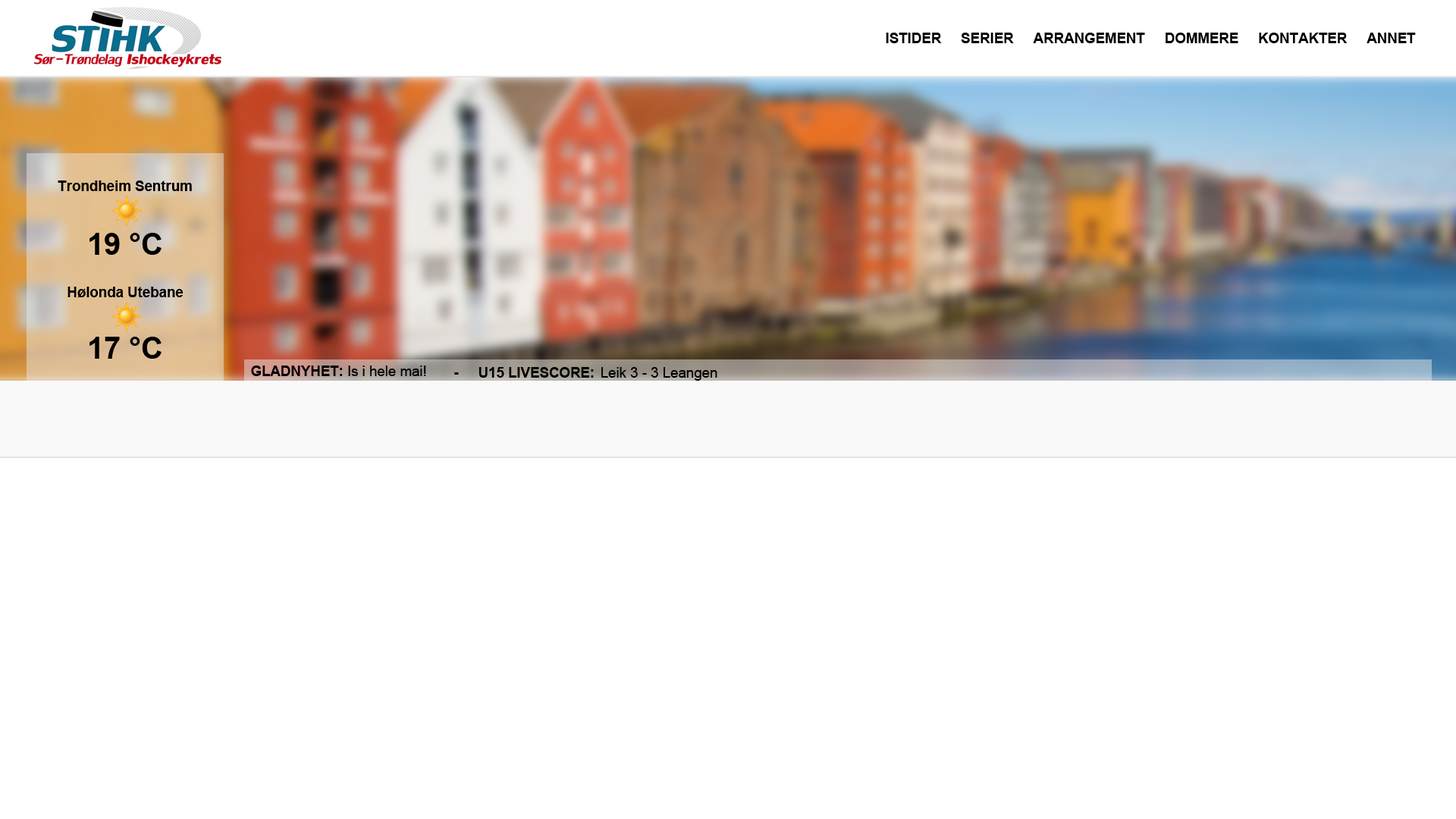
<style>
.page{position:relative;width:1456px;height:819px;background:#ffffff}
.page>*{position:absolute;margin:0}
.t1{font:14.2px "Arial-BoldMT";color:#000000}
.t2{font:30.3px "Arial-BoldMT";color:#000000}
.t3{font:14.2px "ArialMT";color:#000000}
</style>
<div class="page">
<p class="t1" style="left:886px;top:33px;width:530px;height:10px">ISTIDER     SERIER     ARRANGEMENT     DOMMERE     KONTAKTER     ANNET</p>
<p class="t1" style="left:58px;top:180px;width:134px;height:11px">Trondheim Sentrum</p>
<p class="t2" style="left:89px;top:233px;width:73px;height:22px">19 °C</p>
<p class="t1" style="left:67px;top:287px;width:117px;height:11px">Hølonda Utebane</p>
<p class="t2" style="left:89px;top:337px;width:73px;height:22px">17 °C</p>
<p class="t1" style="left:251px;top:366px;width:91px;height:10px">GLADNYHET:</p>
<p class="t3" style="left:348px;top:366px;width:78px;height:10px">Is i hele mai!</p>
<p class="t1" style="left:454px;top:367px;width:140px;height:11px">-     U15 LIVESCORE:</p>
<p class="t3" style="left:601px;top:367px;width:116px;height:14px">Leik 3 - 3 Leangen</p>
</div>
